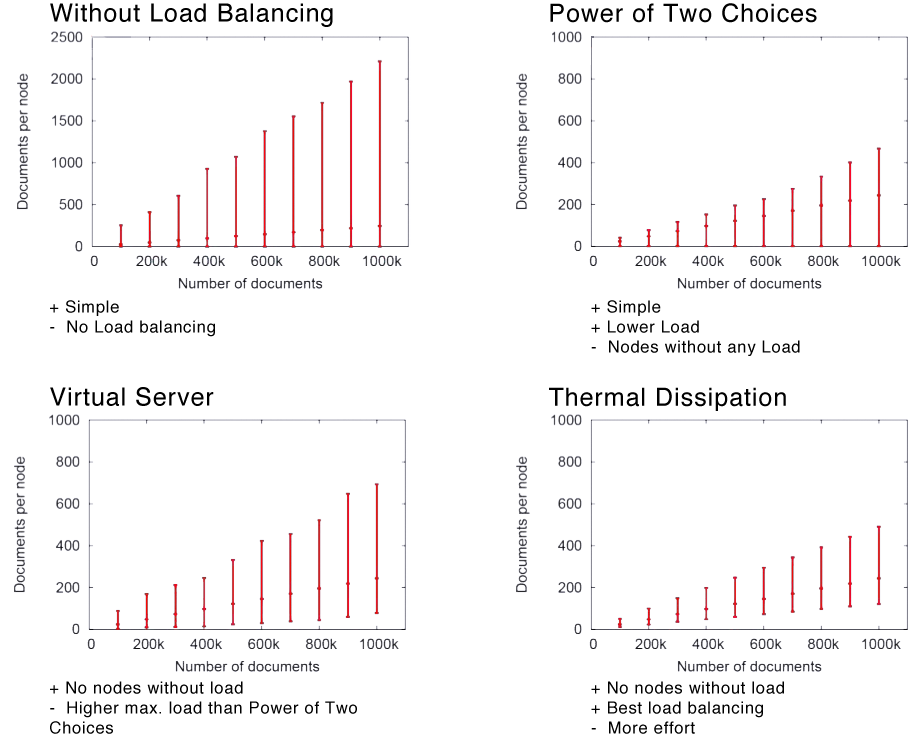
<style>
.page{position:relative;width:924px;height:746px;background:#ffffff}
.page>*{position:absolute;margin:0}
.t1{font:25px "Helvetica";letter-spacing:0.04em;color:#000000}
.t2{font:16.7px "Helvetica";letter-spacing:0.04em;color:#000000}
</style>
<div class="page">
<p class="t1" style="left:50px;top:3px;width:283px;height:24px">Without Load Balancing</p>
<p class="t1" style="left:550px;top:3px;width:267px;height:20px">Power of Two Choices</p>
<p class="t2" style="left:50px;top:300px;width:165px;height:37px">+ Simple<br>-  No Load balancing</p>
<p class="t2" style="left:591px;top:300px;width:209px;height:56px">+ Simple<br>+ Lower Load<br>-  Nodes without any Load</p>
<p class="t1" style="left:50px;top:387px;width:164px;height:19px">Virtual Server</p>
<p class="t1" style="left:549px;top:387px;width:237px;height:24px">Thermal Dissipation</p>
<p class="t2" style="left:50px;top:681px;width:307px;height:53px">+ No nodes without load<br>-  Higher max. load than Power of Two Choices</p>
<p class="t2" style="left:591px;top:681px;width:193px;height:53px">+ No nodes without load<br>+ Best load balancing<br>-  More effort</p>
</div>
